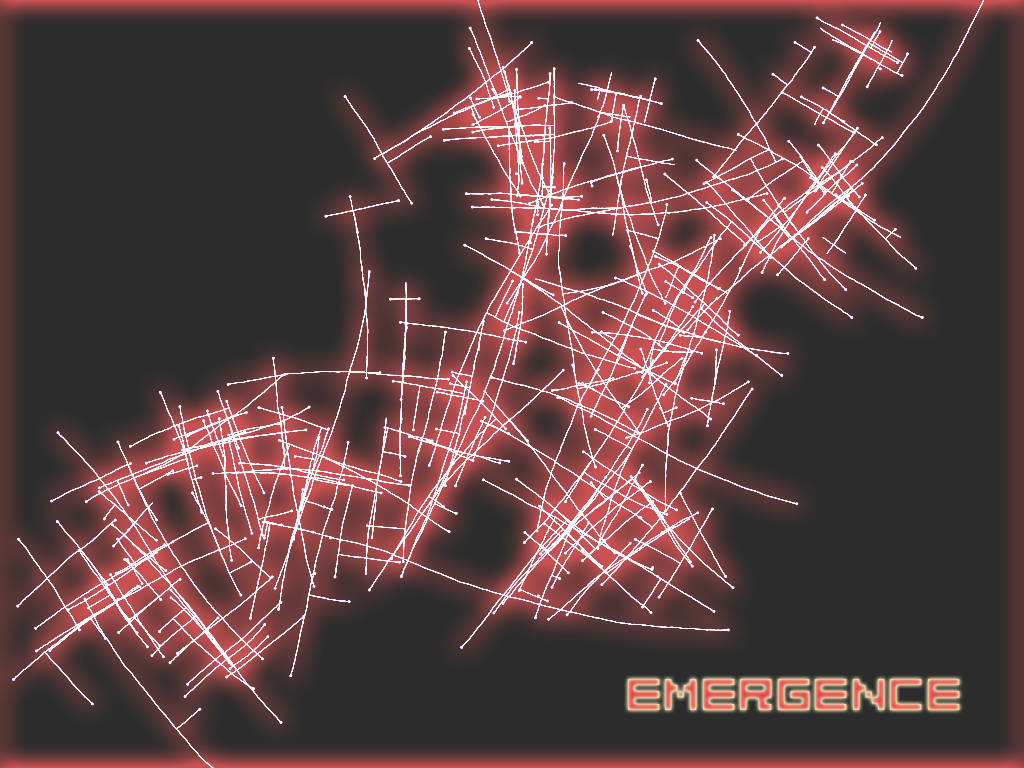
<style>
.page{position:relative;width:1024px;height:768px;background:#2c2c2c}
.page>*{position:absolute;margin:0}
.t1{font:50px "04b08"}
</style>
<div class="page">
<p class="t1" style="left:628px;top:679px;width:332px;height:31px">Emergence</p>
</div>
